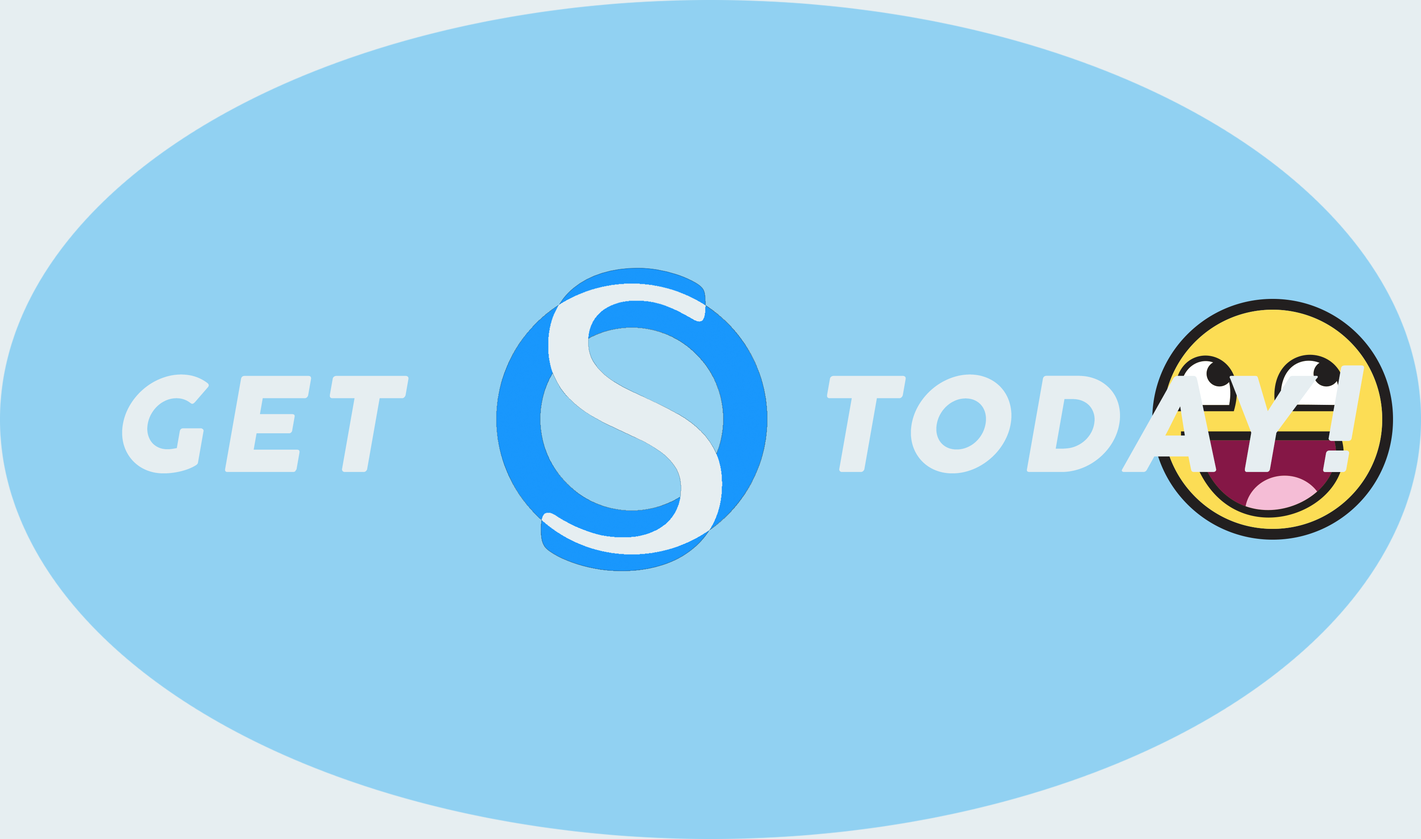
<style>
.page{position:relative;width:1421px;height:839px;background:#91d1f2}
.page>*{position:absolute;margin:0}
.t1{font:129.2px "COCOGOOSE";letter-spacing:0.075em;color:#e6eef1;text-transform:uppercase;font-style:italic}
</style>
<div class="page">
<p class="t1" style="left:122px;top:365px;width:1242px;height:108px">get        today!</p>
</div>
